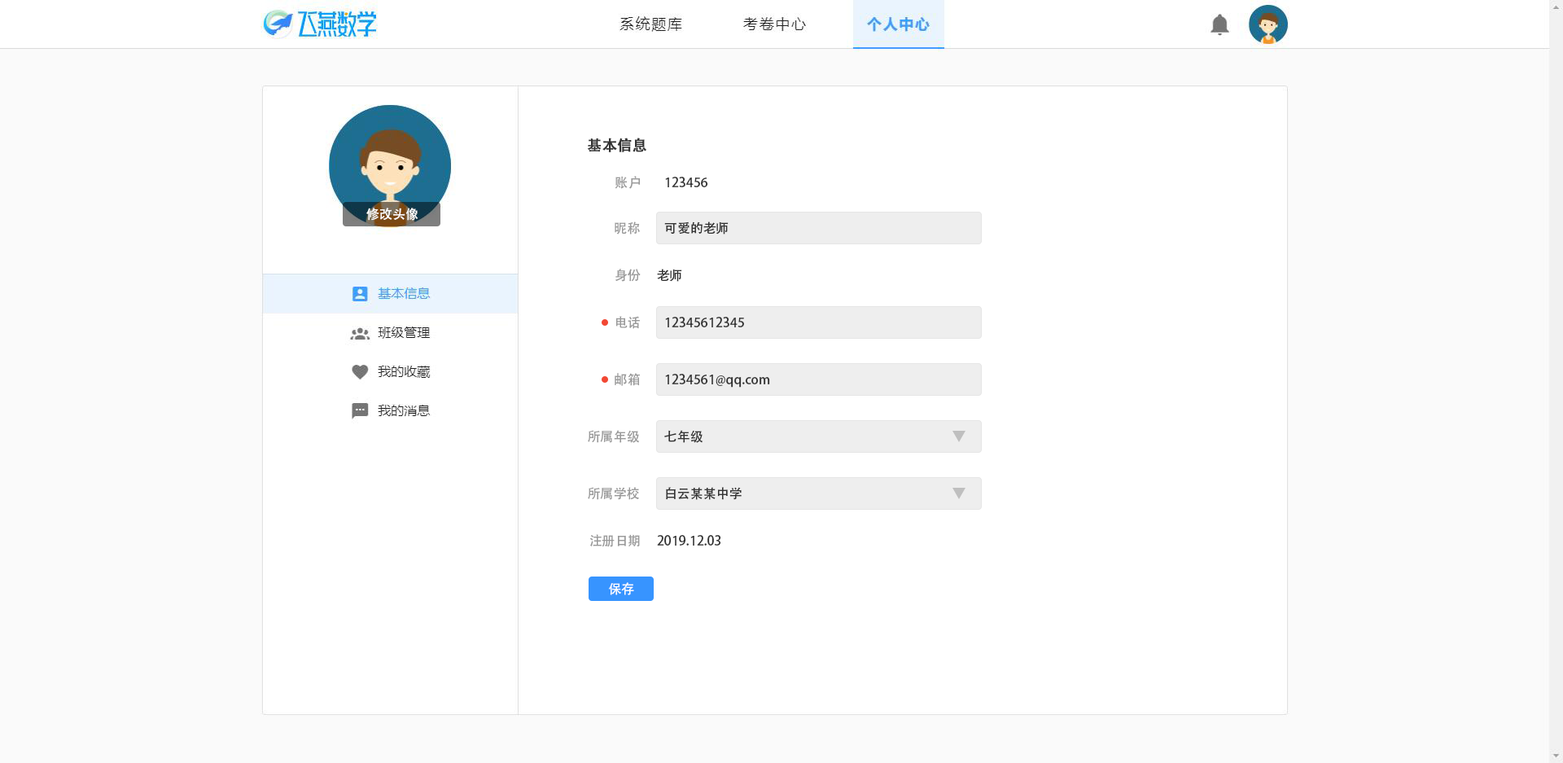
<style>
.page{position:relative;width:1563px;height:763px;background:#ffffff}
.page>*{position:absolute;margin:0}
.t1{font:14.7px "AdobeHeitiStd-Regular";color:#333333;font-weight:bold}
.t2{font:13px "AdobeHeitiStd-Regular";color:#999999}
.t3{font:13px "AdobeHeitiStd-Regular";color:#333333}
.t4{font:13px "AdobeHeitiStd-Regular";color:#ffffff}
</style>
<div class="page">
<p class="t1" style="left:587px;top:138px;width:59px;height:14px">基本信息</p>
<p class="t2" style="left:615px;top:176px;width:26px;height:13px">账户</p>
<p class="t3" style="left:665px;top:177px;width:43px;height:10px">123456</p>
<p class="t4" style="left:366px;top:208px;width:52px;height:13px">修改头像</p>
<p class="t2" style="left:615px;top:221px;width:25px;height:13px">昵称</p>
<p class="t3" style="left:664px;top:221px;width:65px;height:13px">可爱的老师</p>
<p class="t2" style="left:615px;top:269px;width:26px;height:13px">身份</p>
<p class="t3" style="left:657px;top:269px;width:25px;height:13px">老师</p>
<p class="t2" style="left:615px;top:316px;width:25px;height:13px">电话</p>
<p class="t3" style="left:665px;top:317px;width:79px;height:10px">12345612345</p>
<p class="t2" style="left:615px;top:373px;width:25px;height:13px">邮箱</p>
<p class="t3" style="left:665px;top:374px;width:105px;height:14px">1234561@qq.com</p>
<p class="t2" style="left:588px;top:430px;width:52px;height:13px">所属年级</p>
<p class="t3" style="left:664px;top:430px;width:39px;height:13px">七年级</p>
<p class="t2" style="left:588px;top:487px;width:51px;height:13px">所属学校</p>
<p class="t3" style="left:666px;top:487px;width:76px;height:13px">白云某某中学</p>
<p class="t2" style="left:589px;top:534px;width:51px;height:13px">注册日期</p>
<p class="t3" style="left:657px;top:535px;width:64px;height:10px">2019.12.03</p>
<p class="t4" style="left:609px;top:582px;width:25px;height:13px">保存</p>
</div>
